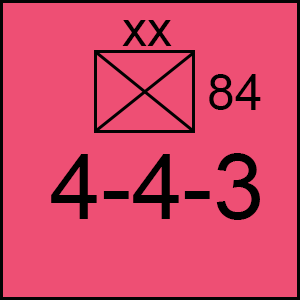
<style>
.page{position:relative;width:300px;height:300px;background:#ee4f74}
.page>*{position:absolute;margin:0}
.t1{font:50px "ArialMT";color:#000000}
.t2{font:91.7px "ArialMT";color:#000000}
</style>
<div class="page">
<p class="t1" style="left:122px;top:20px;width:50px;height:26px">xx</p>
<p class="t1" style="left:209px;top:74px;width:52px;height:36px">84</p>
<p class="t2" style="left:51px;top:153px;width:209px;height:67px">4-4-3</p>
</div>
